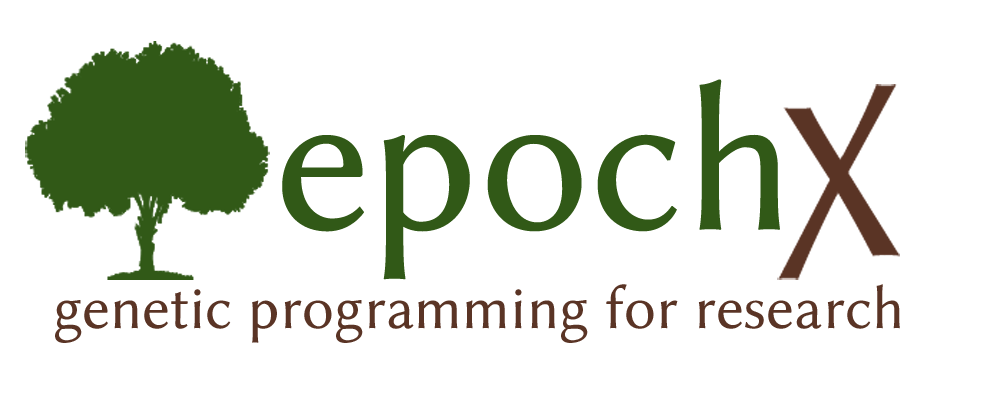
<style>
.page{position:relative;width:1000px;height:404px;background:#ffffff}
.page>*{position:absolute;margin:0}
.t1{font:214.1px "LinBiolinumO";color:#315917}
.t2{font:62.4px "LinBiolinumO";color:#5a3425}
</style>
<div class="page">
<p class="t1" style="left:282px;top:79px;width:498px;height:201px">epoch</p>
<p class="t2" style="left:55px;top:284px;width:845px;height:59px">genetic programming for research</p>
</div>
